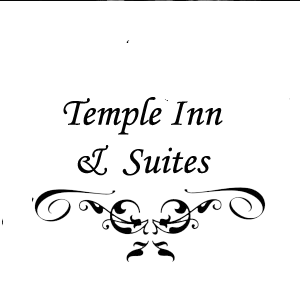
<style>
.page{position:relative;width:300px;height:300px;background:#ffffff}
.page>*{position:absolute;margin:0}
.t1{font:40px "MonotypeCorsiva";color:#030303}
</style>
<div class="page">
<p class="t1" style="left:63px;top:96px;width:160px;height:79px;text-align:center">Temple Inn <br>&amp;  Suites</p>
</div>
